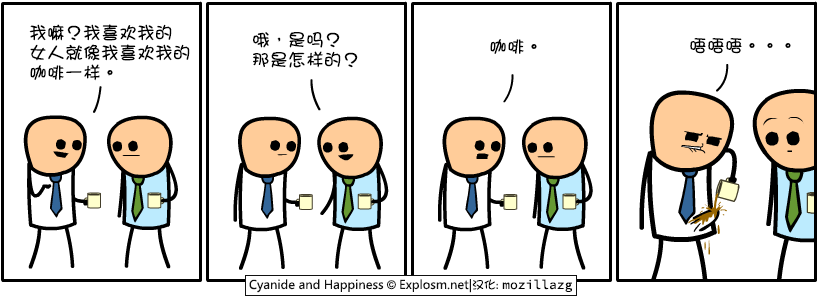
<style>
.page{position:relative;width:820px;height:300px;background:#ffffff}
.page>*{position:absolute;margin:0}
.t1{font:18px/20px "DFGirl";color:#000000}
.t2{font:18px "DFGirl";color:#000000}
</style>
<div class="page">
<p class="t1" style="left:29px;top:24px;width:161px;height:57px">我嘛？我喜欢我的<br>女人就像我喜欢我的<br>咖啡一样。</p>
<p class="t1" style="left:253px;top:32px;width:105px;height:36px">哦，是吗？<br>那是怎样的？</p>
<p class="t2" style="left:490px;top:39px;width:47px;height:15px">咖啡。</p>
<p class="t2" style="left:690px;top:38px;width:101px;height:16px">唔唔唔。。。</p>
</div>
